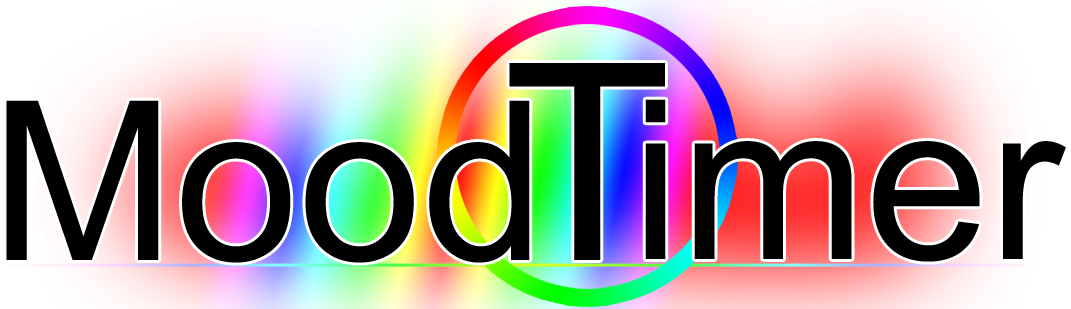
<style>
.page{position:relative;width:1071px;height:309px}
.page>*{position:absolute;margin:0}
.t1{font:274.8px "ArialMT";color:#000000}
.t2{font:222px "ArialMT";color:#000000}
</style>
<div class="page">
<p class="t1" style="left:509px;top:63px;width:156px;height:197px">T</p>
<p class="t2" style="left:6px;top:100px;width:524px;height:163px">Mood</p>
<p class="t2" style="left:645px;top:99px;width:421px;height:163px">imer</p>
</div>
